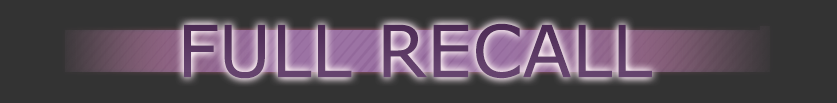
<style>
.page{position:relative;width:837px;height:103px;background:#333333}
.page>*{position:absolute;margin:0}
.t1{font:72px "Verdana";color:#5c3a65}
</style>
<div class="page">
<p class="t1" style="left:184px;top:23px;width:468px;height:56px">FULL RECALL</p>
</div>
